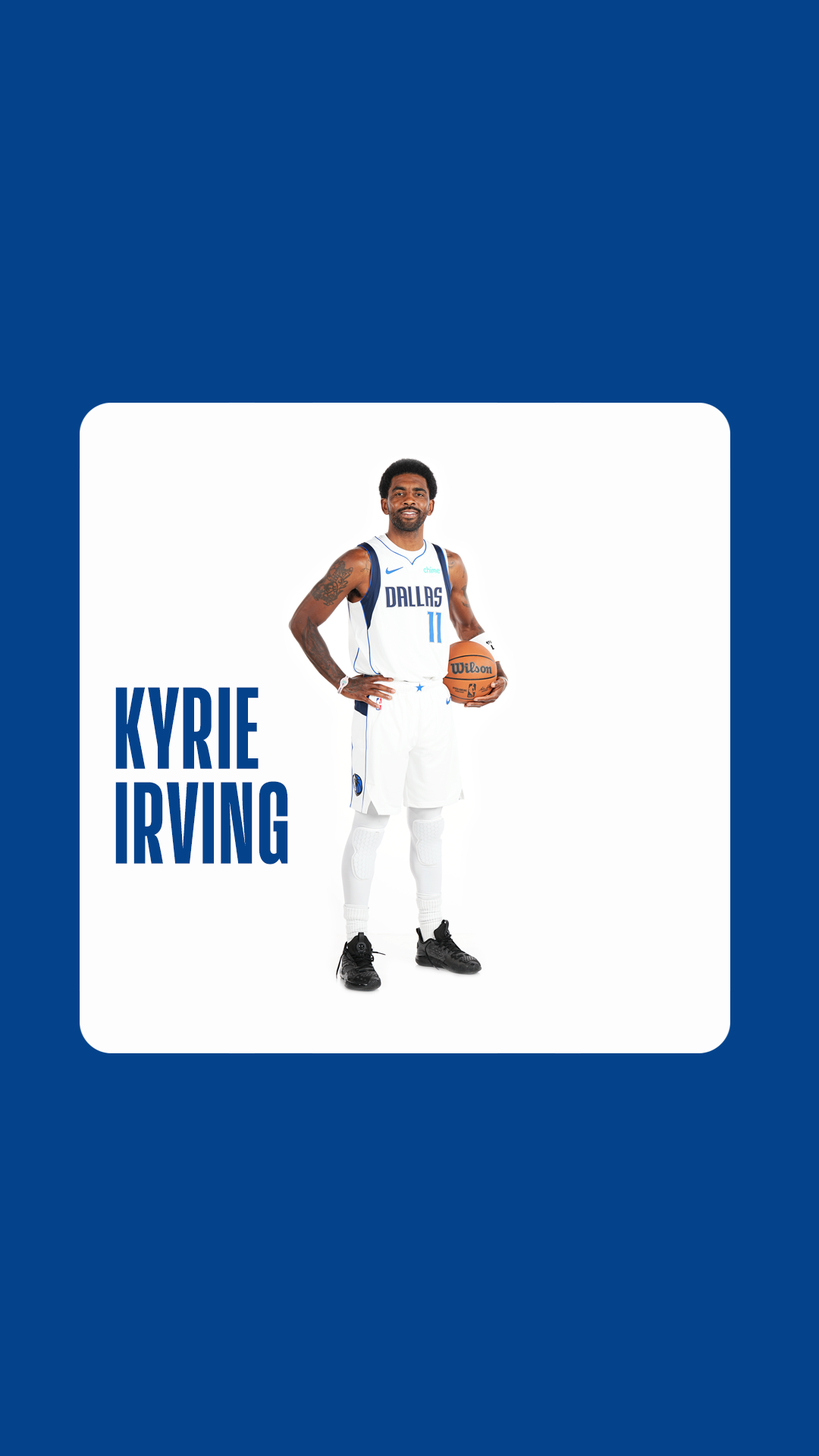
<style>
.page{position:relative;width:819px;height:1456px;background:#04438c}
.page>*{position:absolute;margin:0}
.t1{font:113.7px/94.8px "ActionNBAApp-Bold";color:#04438c}
</style>
<div class="page">
<p class="t1" style="left:115px;top:687px;width:173px;height:177px">KYRIE<br>IRVING</p>
</div>
